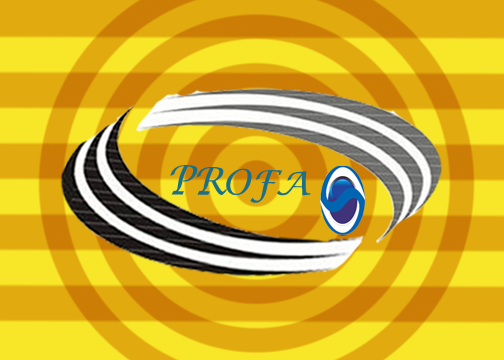
<style>
.page{position:relative;width:504px;height:360px;background:#e1aa0e}
.page>*{position:absolute;margin:0}
.t1{font:37.5px "LucidaCalligraphy-Italic";color:#1d6f86;scale:0.78 1}
</style>
<div class="page">
<p class="t1" style="left:170px;top:165px;width:141px;height:38px">PROFA</p>
</div>
